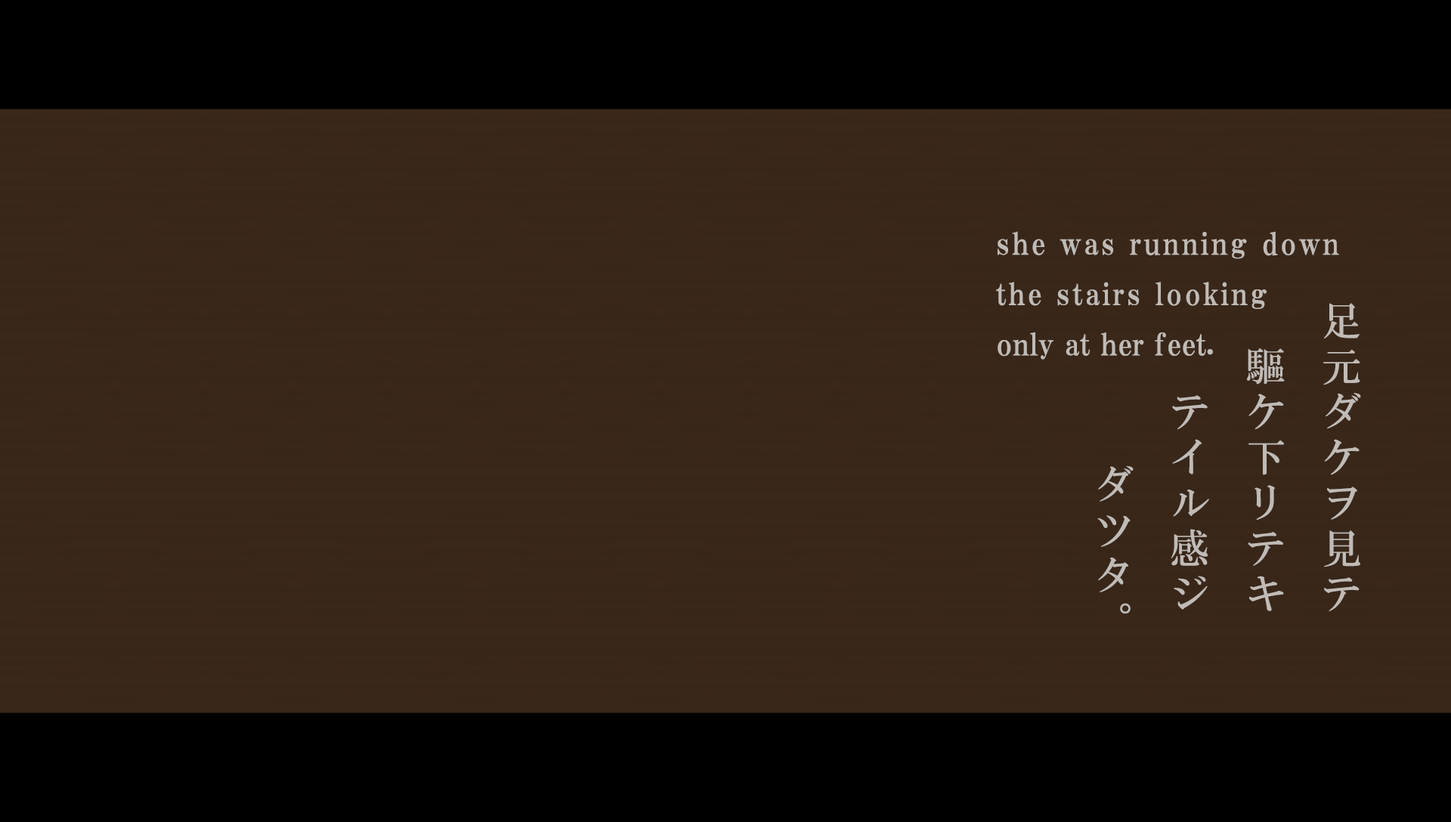
<style>
.page{position:relative;width:1451px;height:822px;background:#382719}
.page>*{position:absolute;margin:0}
.t1{font:30.2px/50.4px "HGPMinchoE";letter-spacing:0.075em;color:#c0bbb6}
.t2{font:30.2px/50.4px "HGPMinchoE";letter-spacing:0.01em;color:#c0bbb6}
.t3{font:39.6px/75.8px "HGMinchoB";letter-spacing:0.15em;color:#c0bbb6}
.t4{font:39.6px/75.8px "HGMinchoB";letter-spacing:-0.43em;color:#c0bbb6}
</style>
<div class="page">
<p class="t1" style="left:996px;top:231px;width:343px;height:129px">she was running down<br>the stairs looking<br><span class="t2">only at her feet.</span></p>
<p class="t3" style="left:1097px;top:303px;width:264px;height:310px;text-align:right">足元ダケヲ見テ<br>驅ケ下リテキ<br>テイル感ジ<br> ダツタ<span class="t4">。</span></p>
</div>
